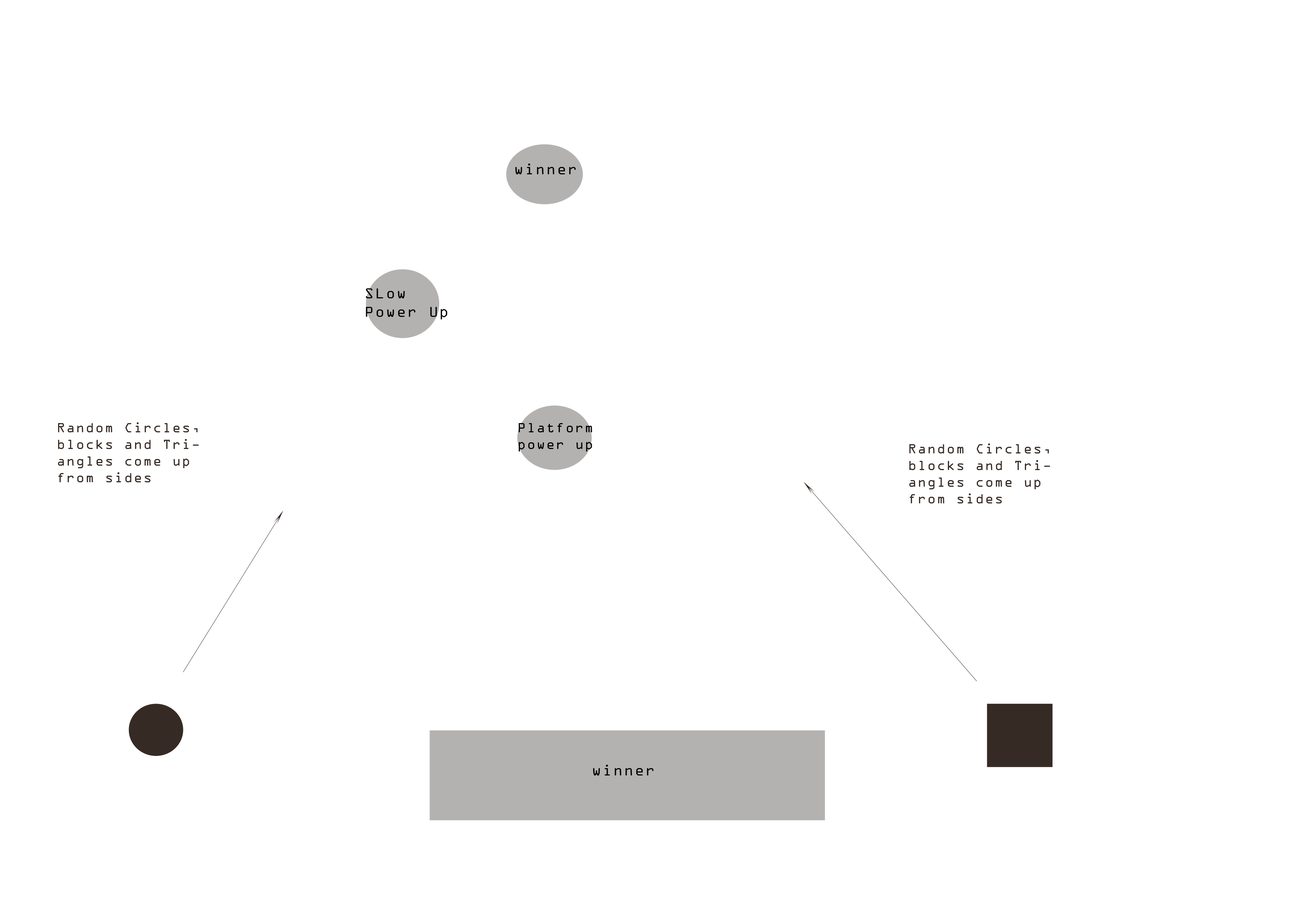
<style>
.page{position:relative;width:1299px;height:918px;background:#ffffff}
.page>*{position:absolute;margin:0}
.t1{font:15.4px "OCRAExtended";letter-spacing:0.09em;color:#000000}
.t2{font:13.9px "OCRAExtended";letter-spacing:0.09em;color:#362a24}
.t3{font:13.9px "OCRAExtended";letter-spacing:0.09em;color:#000000}
</style>
<div class="page">
<p class="t1" style="left:515px;top:164px;width:61px;height:10px">winner</p>
<p class="t2" style="left:58px;top:422px;width:141px;height:60px">Random Circles, blocks and Triangles come up from sides</p>
<p class="t3" style="left:518px;top:423px;width:74px;height:29px">Platform<br>power up</p>
<p class="t2" style="left:909px;top:444px;width:141px;height:60px">Random Circles, blocks and Triangles come up from sides</p>
<p class="t1" style="left:593px;top:765px;width:60px;height:11px">winner</p>
</div>
